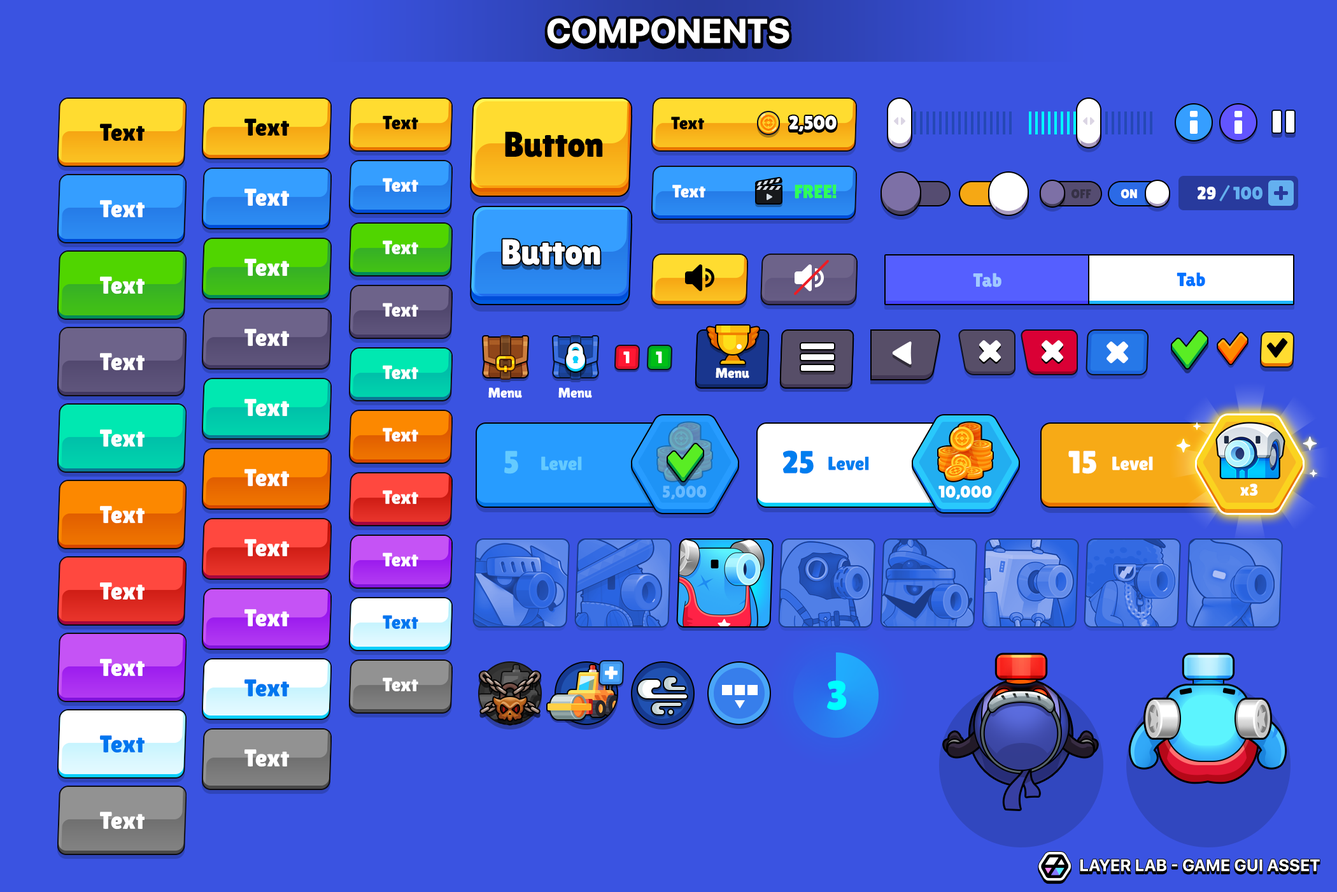
<style>
.page{position:relative;width:1337px;height:892px;background:#3a53e1}
.page>*{position:absolute;margin:0}
.t1{font:34.3px "SFUIDisplay-Heavy";color:#ffffff;text-transform:uppercase}
.t2{font:24.2px "LilitaOne";color:#000000}
.t3{font:19.1px "LilitaOne";color:#000000}
.t4{font:17.8px "LilitaOne";color:#000000}
.t5{font:19.1px "LilitaOne";color:#ffffff;text-transform:uppercase}
.t6{font:35.7px "LilitaOne";color:#000000}
.t7{font:19.1px "LilitaOne";color:#ffffff}
.t8{font:17.8px "LilitaOne";color:#ffffff}
.t9{font:19.1px "LilitaOne";color:#30ff58;text-transform:uppercase}
.t10{font:17.8px "LilitaOne";color:#64b0ef}
.t11{font:24.2px "LilitaOne";color:#ffffff}
.t12{font:12.7px "LilitaOne";color:#363146;text-transform:uppercase}
.t13{font:12.7px "LilitaOne";color:#ffffff;text-transform:uppercase}
.t14{font:35.7px "LilitaOne";color:#ffffff}
.t15{font:19.1px "LilitaOne";color:#a1c9ff}
.t16{font:19.1px "LilitaOne";color:#0072ff}
.t17{font:16.6px "LilitaOne";color:#ffffff;text-transform:uppercase}
.t18{font:14px "LilitaOne";color:#ffffff}
.t19{font:31.8px "LilitaOne";color:#64caff}
.t20{font:19.1px "LilitaOne";color:#64caff}
.t21{font:31.8px "LilitaOne";color:#007def}
.t22{font:19.1px "LilitaOne";color:#007def}
.t23{font:31.8px "LilitaOne";color:#ffffff}
.t24{font:16.6px "LilitaOne";color:#67baff}
.t25{font:16.6px "LilitaOne";color:#ffffff}
.t26{font:19.1px "LilitaOne";color:#0076ef}
.t27{font:24.2px "LilitaOne";color:#0076ef}
.t28{font:40.8px "LilitaOne";color:#00ffff}
.t29{font:16.5px "SFUIDisplay-Bold";letter-spacing:0.02em;color:#ffffff;text-transform:uppercase}
</style>
<div class="page">
<p class="t1" style="left:547px;top:18px;width:243px;height:26px">Components</p>
<p class="t2" style="left:100px;top:124px;width:45px;height:17px">Text</p>
<p class="t2" style="left:245px;top:118px;width:44px;height:18px">Text</p>
<p class="t3" style="left:383px;top:115px;width:35px;height:14px">Text</p>
<p class="t4" style="left:671px;top:117px;width:33px;height:12px">Text</p>
<p class="t5" style="left:789px;top:115px;width:48px;height:17px">2,500</p>
<p class="t6" style="left:505px;top:131px;width:98px;height:26px">Button</p>
<p class="t7" style="left:383px;top:178px;width:35px;height:14px">Text</p>
<p class="t8" style="left:673px;top:185px;width:33px;height:12px">Text</p>
<p class="t9" style="left:795px;top:184px;width:42px;height:15px">Free!</p>
<p class="t10" style="left:1198px;top:185px;width:65px;height:16px"><span class="t8">29 </span>/ 100</p>
<p class="t11" style="left:245px;top:189px;width:44px;height:17px">Text</p>
<p class="t12" style="left:1071px;top:189px;width:21px;height:10px">off</p>
<p class="t13" style="left:1121px;top:189px;width:16px;height:10px">ON</p>
<p class="t11" style="left:100px;top:200px;width:45px;height:18px">Text</p>
<p class="t7" style="left:383px;top:240px;width:35px;height:14px">Text</p>
<p class="t14" style="left:502px;top:239px;width:99px;height:26px">Button</p>
<p class="t11" style="left:245px;top:259px;width:44px;height:17px">Text</p>
<p class="t11" style="left:100px;top:276px;width:45px;height:18px">Text</p>
<p class="t15" style="left:973px;top:273px;width:29px;height:14px">Tab</p>
<p class="t16" style="left:1177px;top:272px;width:29px;height:15px">Tab</p>
<p class="t7" style="left:383px;top:303px;width:35px;height:14px">Text</p>
<p class="t11" style="left:245px;top:329px;width:44px;height:17px">Text</p>
<p class="t11" style="left:100px;top:353px;width:45px;height:18px">Text</p>
<p class="t17" style="left:623px;top:351px;width:7px;height:12px">1</p>
<p class="t17" style="left:656px;top:351px;width:6px;height:12px">1</p>
<p class="t7" style="left:383px;top:365px;width:35px;height:14px">Text</p>
<p class="t18" style="left:716px;top:367px;width:34px;height:11px">Menu</p>
<p class="t18" style="left:488px;top:387px;width:34px;height:11px">Menu</p>
<p class="t18" style="left:559px;top:387px;width:33px;height:11px">Menu</p>
<p class="t11" style="left:245px;top:399px;width:44px;height:18px">Text</p>
<p class="t11" style="left:100px;top:429px;width:45px;height:18px">Text</p>
<p class="t7" style="left:383px;top:427px;width:35px;height:14px">Text</p>
<p class="t19" style="left:504px;top:450px;width:14px;height:24px">5</p>
<p class="t20" style="left:541px;top:456px;width:41px;height:14px">Level</p>
<p class="t21" style="left:783px;top:450px;width:31px;height:24px">25</p>
<p class="t22" style="left:829px;top:456px;width:40px;height:14px">Level</p>
<p class="t23" style="left:1069px;top:450px;width:28px;height:24px">15</p>
<p class="t7" style="left:1113px;top:456px;width:40px;height:14px">Level</p>
<p class="t11" style="left:245px;top:469px;width:44px;height:18px">Text</p>
<p class="t24" style="left:663px;top:485px;width:44px;height:14px">5,000</p>
<p class="t25" style="left:939px;top:485px;width:53px;height:14px">10,000</p>
<p class="t25" style="left:1241px;top:483px;width:17px;height:12px">x3</p>
<p class="t7" style="left:383px;top:490px;width:35px;height:14px">Text</p>
<p class="t11" style="left:100px;top:506px;width:45px;height:17px">Text</p>
<p class="t11" style="left:245px;top:539px;width:44px;height:18px">Text</p>
<p class="t7" style="left:383px;top:552px;width:35px;height:14px">Text</p>
<p class="t11" style="left:100px;top:582px;width:45px;height:18px">Text</p>
<p class="t11" style="left:245px;top:609px;width:44px;height:18px">Text</p>
<p class="t26" style="left:383px;top:615px;width:35px;height:14px">Text</p>
<p class="t11" style="left:100px;top:659px;width:45px;height:17px">Text</p>
<p class="t7" style="left:383px;top:677px;width:35px;height:14px">Text</p>
<p class="t27" style="left:245px;top:679px;width:44px;height:18px">Text</p>
<p class="t28" style="left:827px;top:680px;width:20px;height:30px">3</p>
<p class="t27" style="left:100px;top:735px;width:45px;height:18px">Text</p>
<p class="t11" style="left:245px;top:749px;width:44px;height:18px">Text</p>
<p class="t11" style="left:100px;top:811px;width:45px;height:18px">Text</p>
<p class="t29" style="left:1080px;top:858px;width:240px;height:13px">Layer Lab - Game GUI Asset</p>
</div>
